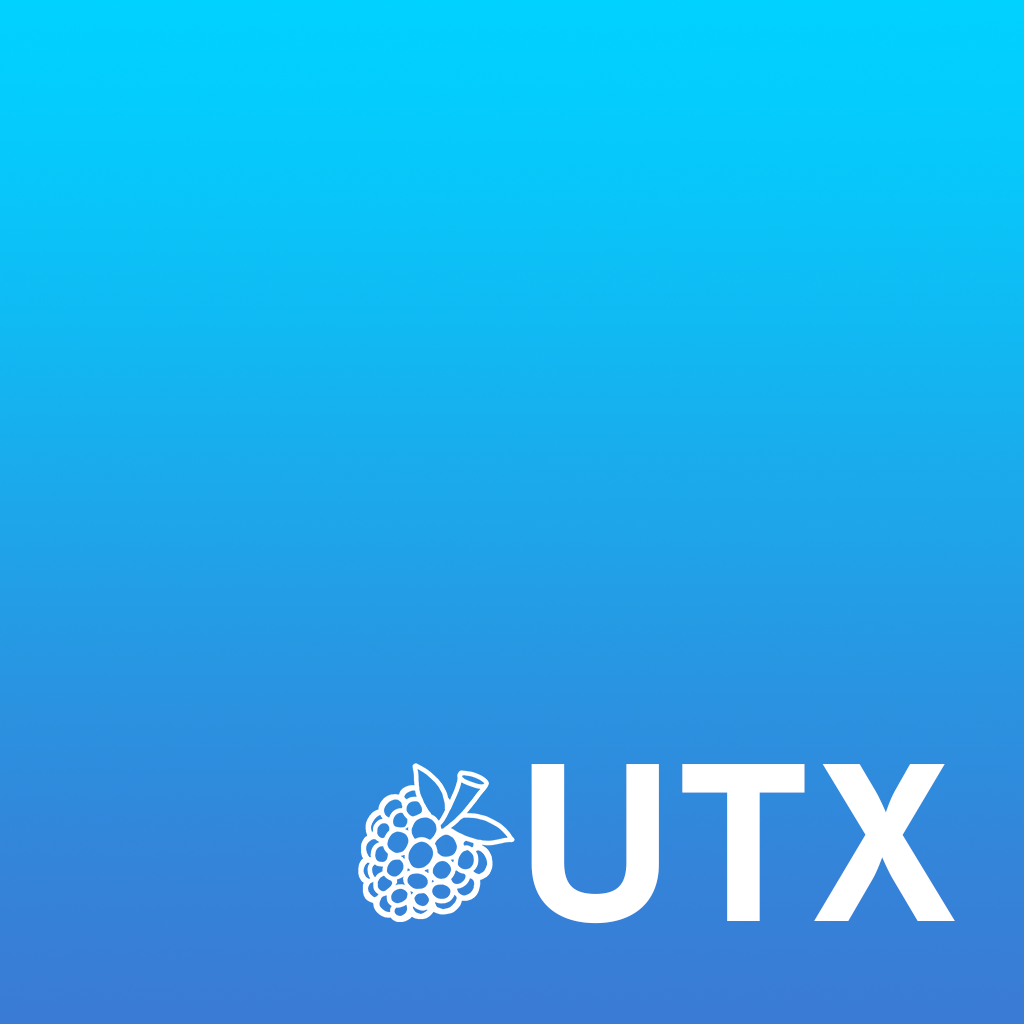
<style>
.page{position:relative;width:1024px;height:1024px}
.page>*{position:absolute;margin:0}
.t1{font:230.8px "NeutrafaceText-Bold";color:#ffffff}
</style>
<div class="page">
<p class="t1" style="left:531px;top:764px;width:424px;height:160px">UTX</p>
</div>
